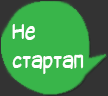
<style>
.page{position:relative;width:108px;height:96px;background:#39b54a}
.page>*{position:absolute;margin:0}
.t1{font:24px "SuplexmentaryComicNC";color:#ffffff;scale:0.8 1}
</style>
<div class="page">
<p class="t1" style="left:12px;top:24px;width:72px;height:50px">Не <br>стартап</p>
</div>
